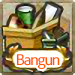
<style>
.page{position:relative;width:75px;height:75px}
.page>*{position:absolute;margin:0}
.t1{font:16px "AdobeClean-Regular";letter-spacing:-0.08em;color:#ff5a00}
</style>
<div class="page">
<p class="t1" style="left:16px;top:54px;width:44px;height:16px">Bangun</p>
</div>
